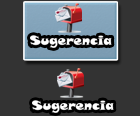
<style>
.page{position:relative;width:140px;height:116px;background:#333333}
.page>*{position:absolute;margin:0}
.t1{font:12.7px "SnapITC-Regular";color:#ffffff}
</style>
<div class="page">
<p class="t1" style="left:30px;top:35px;width:82px;height:13px">Sugerencia</p>
<p class="t1" style="left:32px;top:100px;width:82px;height:13px">Sugerencia</p>
</div>
